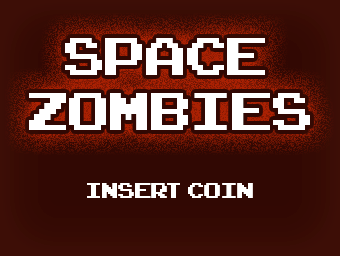
<style>
.page{position:relative;width:340px;height:256px;background:#310803}
.page>*{position:absolute;margin:0}
.t1{font:73.9px/55.8px "ArcadeClassic";color:#ffffff}
.t2{font:30px "ArcadeClassic";color:#ffffff}
</style>
<div class="page">
<p class="t1" style="left:29px;top:38px;width:281px;height:92px;text-align:center">SPACE <br>ZOMBIES</p>
<p class="t2" style="left:87px;top:183px;width:166px;height:15px">INSERT COIN</p>
</div>
